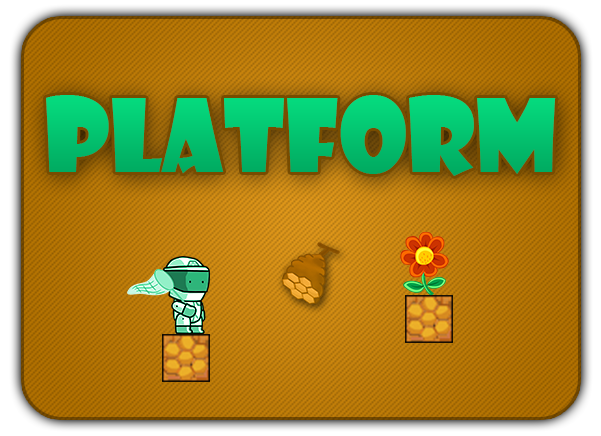
<style>
.page{position:relative;width:601px;height:436px}
.page>*{position:absolute;margin:0}
.t1{font:98.7px "ShowcardGothic-Reg";color:#03c571}
</style>
<div class="page">
<p class="t1" style="left:46px;top:95px;width:510px;height:81px">platform</p>
</div>
